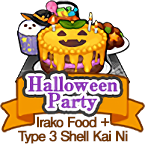
<style>
.page{position:relative;width:145px;height:154px;background:#ffffff}
.page>*{position:absolute;margin:0}
.t1{font:14px/14px "FutoGoB101Pr5-Bold";letter-spacing:-0.08em;color:#703300;font-weight:bold}
</style>
<div class="page">
<p class="t1" style="left:18px;top:116px;width:110px;height:28px;text-align:center">Irako Food +<br>Type 3 Shell Kai Ni</p>
</div>
